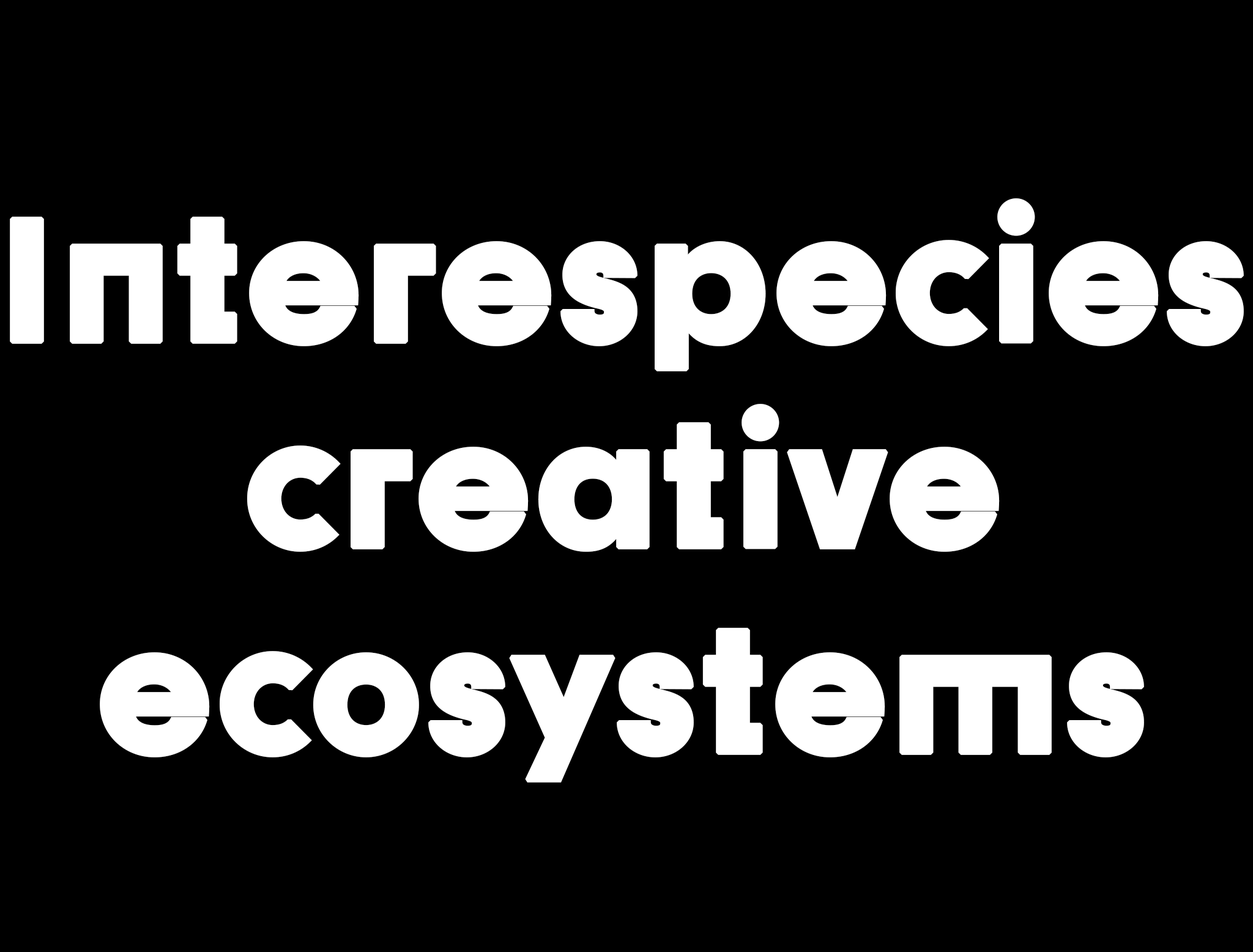
<style>
.page{position:relative;width:1253px;height:952px;background:#000000}
.page>*{position:absolute;margin:0}
.t1{font:171.3px "Dystopian-Black";letter-spacing:0.005em;color:#ffffff;font-weight:bold}
</style>
<div class="page">
<p class="t1" style="left:10px;top:198px;width:1234px;height:584px;text-align:center">Interespecies<br>creative<br>ecosystems</p>
</div>
